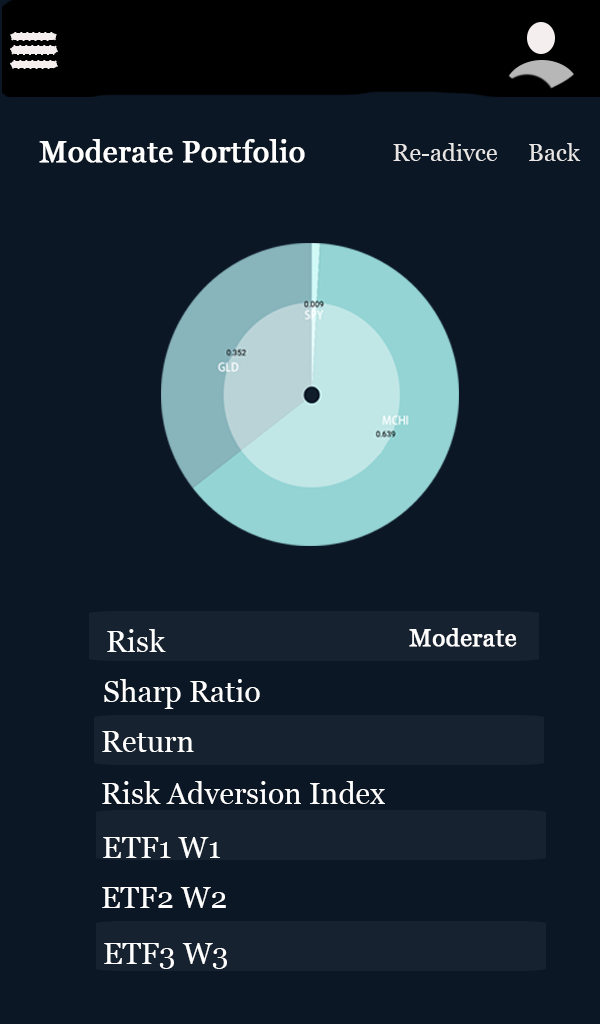
<style>
.page{position:relative;width:600px;height:1024px;background:#0c1726}
.page>*{position:absolute;margin:0}
.t1{font:30px "Georgia";color:#ffffff;font-weight:bold}
.t2{font:24px "Georgia";color:#e8e5e5}
.t3{font:30px "Georgia";color:#ffffff}
.t4{font:24px "Georgia";color:#ffffff;font-weight:bold}
.t5{font:30px "Georgia";color:#ffffff;font-variant:small-caps}
.t6{font:30px "Georgia";color:#ffffff;text-transform:uppercase}
</style>
<div class="page">
<p class="t1" style="left:39px;top:139px;width:266px;height:24px">Moderate Portfolio</p>
<p class="t2" style="left:393px;top:143px;width:104px;height:18px">Re-adivce</p>
<p class="t2" style="left:529px;top:143px;width:52px;height:18px">Back</p>
<p class="t3" style="left:107px;top:629px;width:59px;height:23px">Risk</p>
<p class="t4" style="left:409px;top:628px;width:108px;height:19px">Moderate</p>
<p class="t3" style="left:104px;top:679px;width:156px;height:30px">Sharp Ratio</p>
<p class="t3" style="left:102px;top:731px;width:92px;height:21px">Return</p>
<p class="t3" style="left:102px;top:781px;width:283px;height:23px">Risk Adversion Index</p>
<p class="t3" style="left:103px;top:837px;width:117px;height:21px">ETF<span class="t5">1 </span><span class="t6">w1</span></p>
<p class="t6" style="left:102px;top:887px;width:124px;height:21px">ETF2 W2</p>
<p class="t6" style="left:104px;top:943px;width:123px;height:26px">ETF3 W3</p>
</div>
